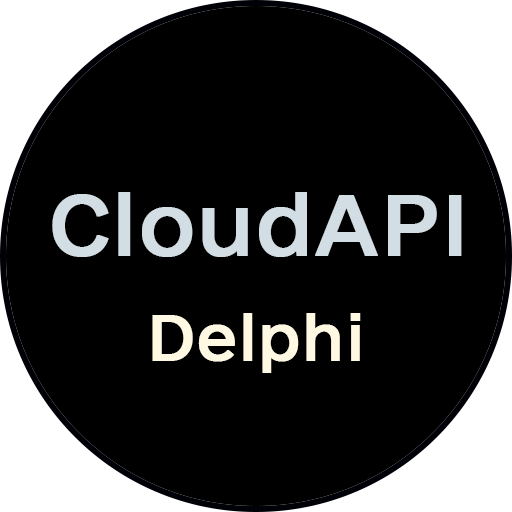
<style>
.page{position:relative;width:512px;height:512px;background:#000000}
.page>*{position:absolute;margin:0}
.t1{font:80.9px "e-Ukraine-Regular";color:#d2dde4;font-weight:bold}
.t2{font:60px "e-Ukraine-Regular";color:#fff9e4;font-weight:bold}
</style>
<div class="page">
<p class="t1" style="left:52px;top:192px;width:410px;height:65px">CloudAPI</p>
<p class="t2" style="left:152px;top:313px;width:209px;height:60px">Delphi</p>
</div>
